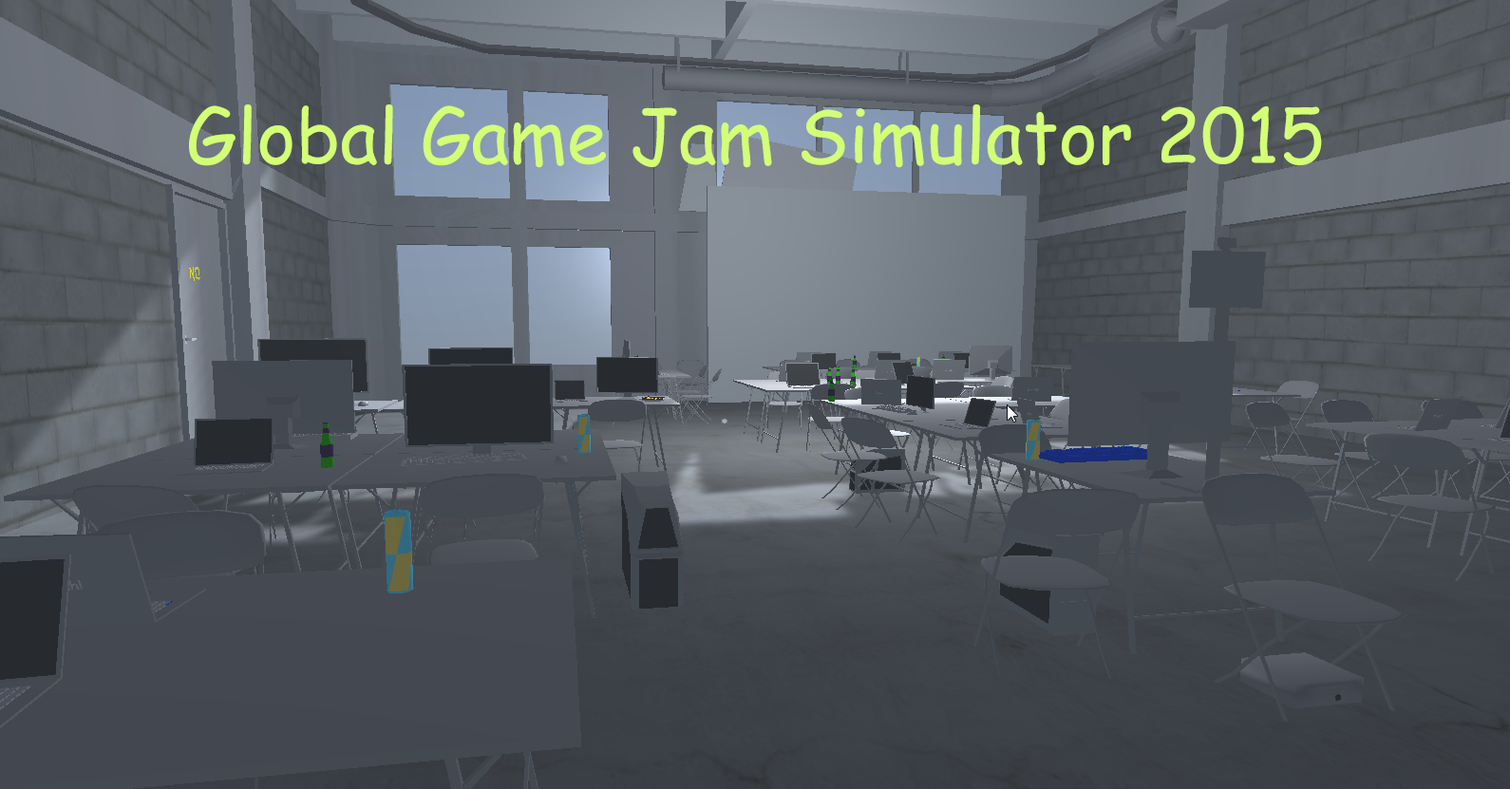
<style>
.page{position:relative;width:1510px;height:789px}
.page>*{position:absolute;margin:0}
.t1{font:74.3px "ComicSansMS";color:#d3ff76}
</style>
<div class="page">
<p class="t1" style="left:189px;top:104px;width:1133px;height:64px">Global Game Jam Simulator 2015</p>
</div>
